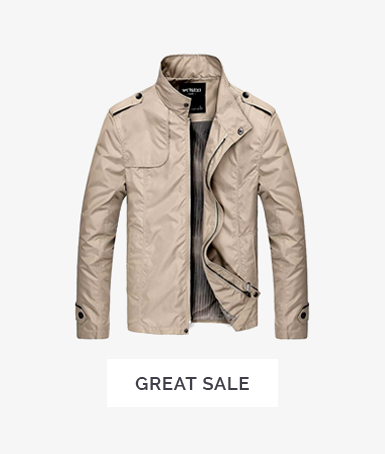
<style>
.page{position:relative;width:385px;height:454px;background:#f6f6f6}
.page>*{position:absolute;margin:0}
.t1{font:18px "Raleway-SemiBold";letter-spacing:0.05em;color:#403e48;text-transform:uppercase}
</style>
<div class="page">
<p class="t1" style="left:135px;top:377px;width:114px;height:13px">great sale</p>
</div>
